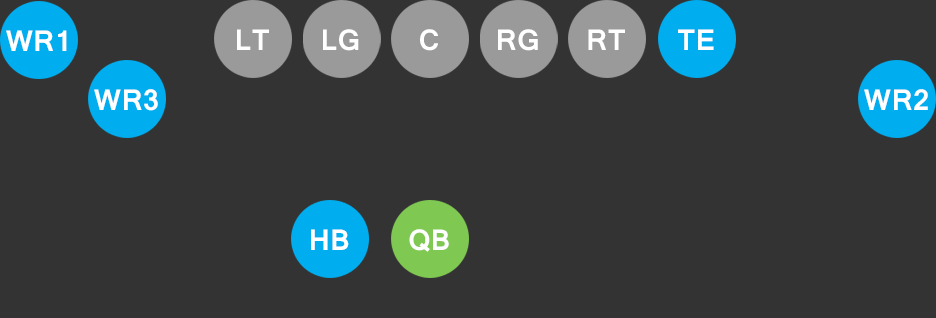
<style>
.page{position:relative;width:936px;height:318px;background:#333333}
.page>*{position:absolute;margin:0}
.t1{font:31.8px "Vrinda-Bold";color:#ffffff}
</style>
<div class="page">
<p class="t1" style="left:6px;top:30px;width:61px;height:21px">WR1</p>
<p class="t1" style="left:237px;top:29px;width:32px;height:21px">LT</p>
<p class="t1" style="left:323px;top:29px;width:36px;height:22px">LG</p>
<p class="t1" style="left:420px;top:29px;width:18px;height:22px">C</p>
<p class="t1" style="left:498px;top:29px;width:40px;height:22px">RG</p>
<p class="t1" style="left:588px;top:29px;width:37px;height:21px">RT</p>
<p class="t1" style="left:678px;top:29px;width:36px;height:21px">TE</p>
<p class="t1" style="left:94px;top:89px;width:64px;height:22px">WR3</p>
<p class="t1" style="left:864px;top:89px;width:64px;height:21px">WR2</p>
<p class="t1" style="left:311px;top:229px;width:38px;height:21px">HB</p>
<p class="t1" style="left:409px;top:229px;width:40px;height:23px">QB</p>
</div>
